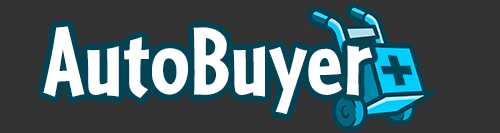
<style>
.page{position:relative;width:500px;height:133px;background:#333333}
.page>*{position:absolute;margin:0}
.t1{font:100px "Cafeteria-Bold";color:#ffffff;font-weight:bold}
.t2{font:83.3px "Cafeteria-Bold";color:#004455;font-weight:bold;scale:0.95 1}
</style>
<div class="page">
<p class="t1" style="left:43px;top:26px;width:330px;height:88px">AutoBuyer</p>
<p class="t2" style="left:380px;top:55px;width:33px;height:31px">+</p>
</div>
